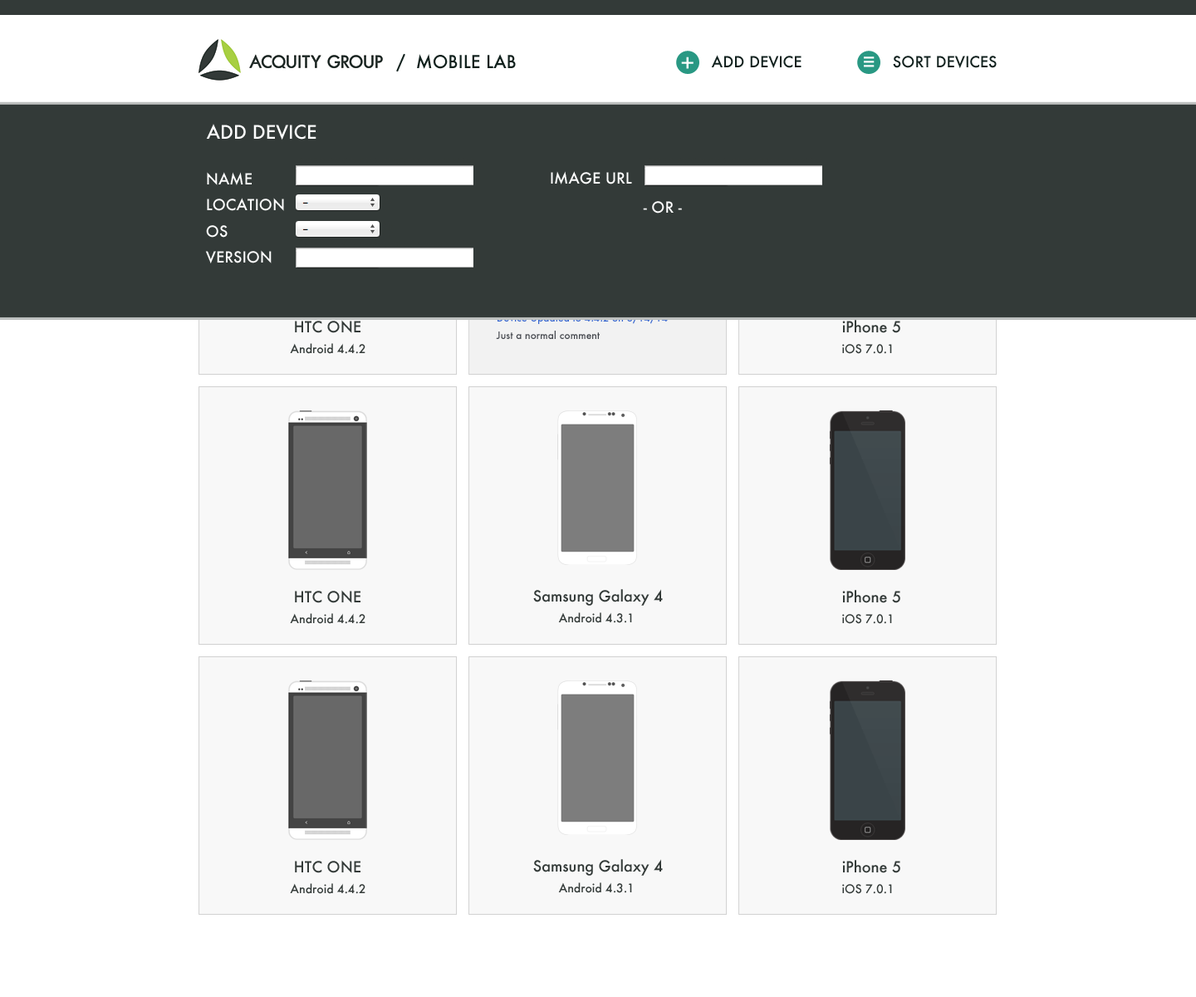
<style>
.page{position:relative;width:1196px;height:997px;background:#ffffff}
.page>*{position:absolute;margin:0}
.t1{font:17.2px "Futura-Medium";color:#11211d;text-transform:uppercase}
.t2{font:22.2px "Futura-Medium";color:#ffffff;text-transform:uppercase}
.t3{font:15px "Futura-Medium";color:#10201d;text-transform:uppercase}
.t4{font:18.1px/4.1px "Futura-Medium";color:#ffffff;text-transform:uppercase}
.t5{font:18.3px "Futura-Medium";color:#ffffff;text-transform:uppercase}
.t6{font:15px "Futura-Medium";color:#ffffff;text-transform:uppercase}
.t7{font:15px "Futura-Medium";color:#333a38}
.t8{font:11.6px "Futura-Medium";color:#333a38}
</style>
<div class="page">
<p class="t1" style="left:396px;top:53px;width:120px;height:19px">/  Mobile Lab</p>
<p class="t2" style="left:681px;top:56px;width:13px;height:13px">+</p>
<p class="t3" style="left:711px;top:55px;width:91px;height:13px">Add Device</p>
<p class="t4" style="left:864px;top:56px;width:11px;height:11px">_<br>_<br>_</p>
<p class="t3" style="left:893px;top:56px;width:104px;height:12px">Sort Devices</p>
<p class="t5" style="left:206px;top:124px;width:110px;height:16px">ADD DEVICE</p>
<p class="t6" style="left:205px;top:172px;width:79px;height:91px">Name<br>Location<br>OS<br>Version</p>
<p class="t6" style="left:551px;top:171px;width:81px;height:13px">ImagE URL</p>
<p class="t6" style="left:643px;top:201px;width:39px;height:12px">- or -</p>
<p class="t7" style="left:295px;top:320px;width:66px;height:13px">HTC ONE</p>
<p class="t7" style="left:842px;top:320px;width:58px;height:13px">iPhone 5</p>
<p class="t8" style="left:290px;top:343px;width:76px;height:11px">Android 4.4.2</p>
<p class="t8" style="left:842px;top:344px;width:50px;height:10px">iOS 7.0.1</p>
<p class="t7" style="left:295px;top:590px;width:66px;height:13px">HTC ONE</p>
<p class="t7" style="left:533px;top:589px;width:130px;height:17px">Samsung Galaxy 4</p>
<p class="t7" style="left:842px;top:590px;width:58px;height:13px">iPhone 5</p>
<p class="t8" style="left:290px;top:613px;width:76px;height:11px">Android 4.4.2</p>
<p class="t8" style="left:558px;top:612px;width:74px;height:11px">Android 4.3.1</p>
<p class="t8" style="left:842px;top:614px;width:50px;height:10px">iOS 7.0.1</p>
<p class="t7" style="left:295px;top:860px;width:66px;height:13px">HTC ONE</p>
<p class="t7" style="left:533px;top:859px;width:130px;height:17px">Samsung Galaxy 4</p>
<p class="t7" style="left:842px;top:860px;width:58px;height:13px">iPhone 5</p>
<p class="t8" style="left:290px;top:883px;width:76px;height:11px">Android 4.4.2</p>
<p class="t8" style="left:558px;top:882px;width:74px;height:11px">Android 4.3.1</p>
<p class="t8" style="left:842px;top:884px;width:50px;height:10px">iOS 7.0.1</p>
</div>
